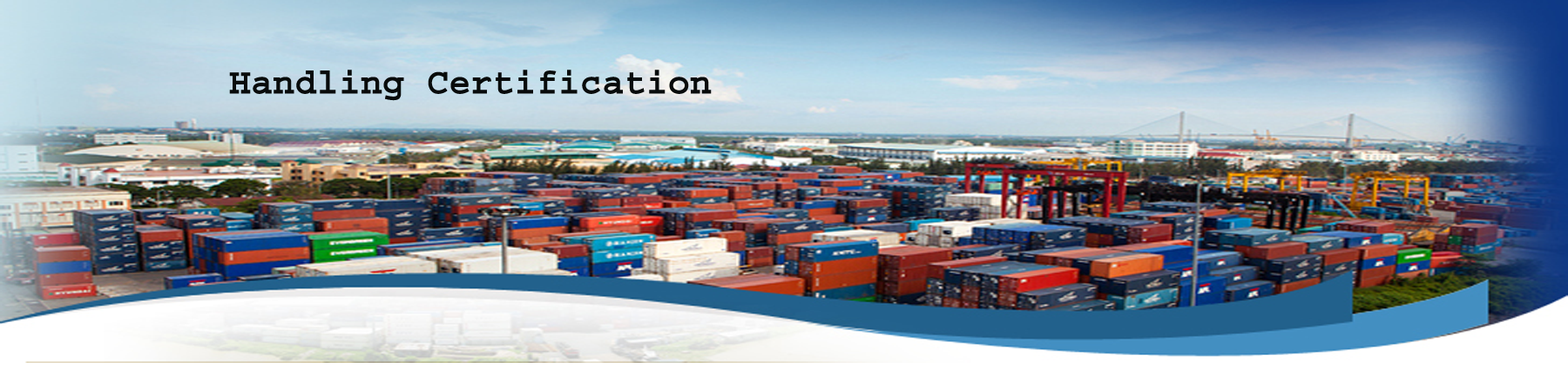
<style>
.page{position:relative;width:1568px;height:389px}
.page>*{position:absolute;margin:0}
.t1{font:36.6px "Courier-Bold";color:#080b0b}
</style>
<div class="page">
<p class="t1" style="left:229px;top:70px;width:483px;height:31px">Handling Certification</p>
</div>
